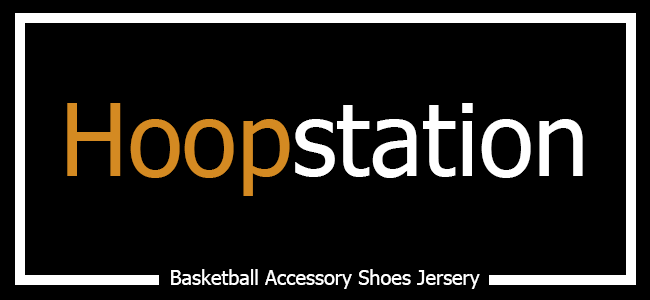
<style>
.page{position:relative;width:650px;height:300px;background:#000000}
.page>*{position:absolute;margin:0}
.t1{font:100px "Tahoma";color:#ffffff}
.t2{font:100px "Tahoma";color:#d48a22}
.t3{font:20px "Tahoma";color:#ffffff}
</style>
<div class="page">
<p class="t1" style="left:67px;top:103px;width:516px;height:93px"><span class="t2">Hoop</span>station</p>
<p class="t3" style="left:171px;top:269px;width:309px;height:20px">Basketball Accessory Shoes Jersery</p>
</div>
